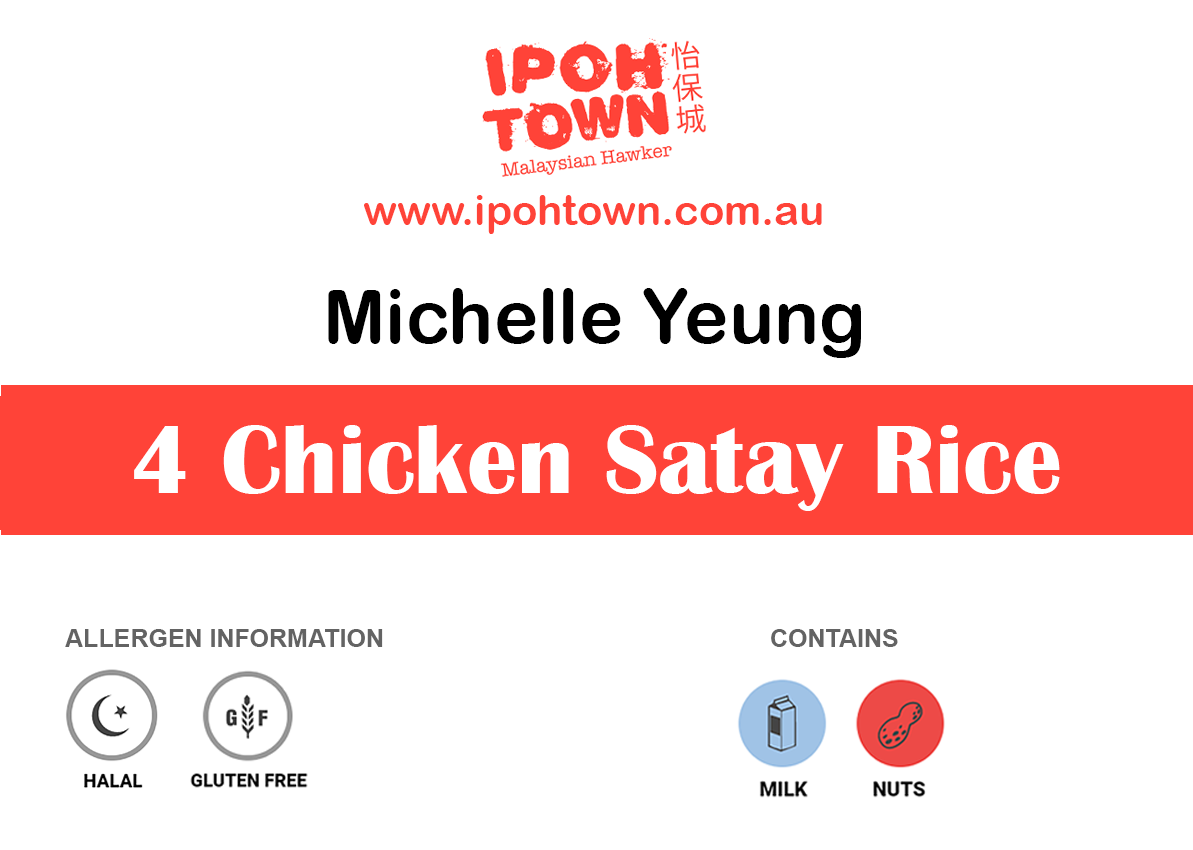
<style>
.page{position:relative;width:1193px;height:850px;background:#ffffff}
.page>*{position:absolute;margin:0}
.t1{font:41.7px "ArialRoundedMTBold";color:#ff4338}
.t2{font:75px "ArialRoundedMTBold";color:#000000}
.t3{font:100px "BritannicBold";color:#ffffff}
.t4{font:25px "Arial-BoldMT";color:#636363}
</style>
<div class="page">
<p class="t1" style="left:364px;top:195px;width:458px;height:39px">www.ipohtown.com.au</p>
<p class="t2" style="left:328px;top:288px;width:533px;height:70px">Michelle Yeung</p>
<p class="t3" style="left:134px;top:425px;width:926px;height:86px">4 Chicken Satay Rice</p>
<p class="t4" style="left:65px;top:629px;width:318px;height:18px">ALLERGEN INFORMATION</p>
<p class="t4" style="left:771px;top:629px;width:127px;height:18px">CONTAINS</p>
</div>
